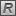
<style>
.page{position:relative;width:16px;height:16px;background:#4d4d4d}
.page>*{position:absolute;margin:0}
.t1{font:14px "Arial-BoldItalicMT";color:#636363}
</style>
<div class="page">
<p class="t1" style="left:3px;top:3px;width:10px;height:10px">R</p>
</div>
